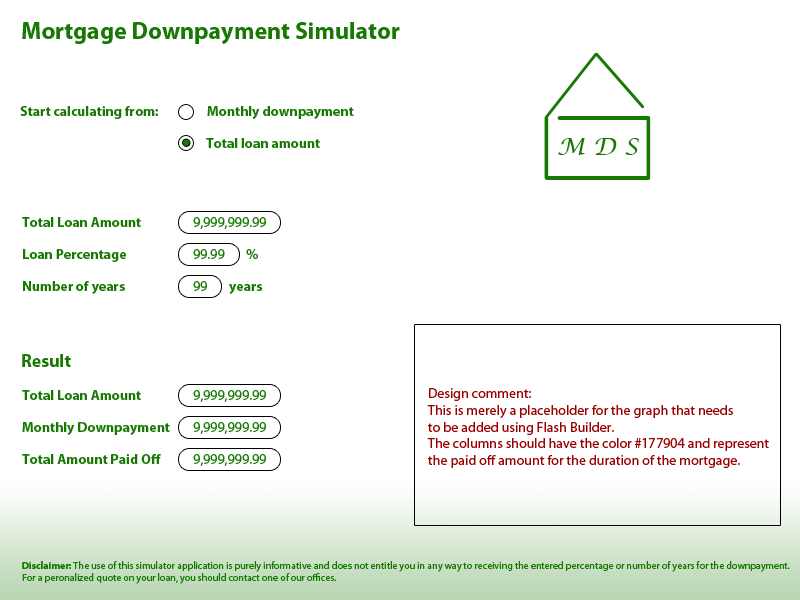
<style>
.page{position:relative;width:800px;height:600px;background:#ffffff}
.page>*{position:absolute;margin:0}
.t1{font:24px "MyriadPro-Bold";color:#177904}
.t2{font:14px "MyriadPro-Bold";color:#177904}
.t3{font:24px "LucidaCalligraphy-Italic";color:#177904}
.t4{font:14px "MyriadPro-Regular";color:#177904}
.t5{font:18px "MyriadPro-Bold";color:#177904}
.t6{font:14px "MyriadPro-Regular";color:#990000}
.t7{font:10px "MyriadPro-Regular";color:#177904}
.t8{font:10px "MyriadPro-Bold";color:#177904}
</style>
<div class="page">
<p class="t1" style="left:22px;top:22px;width:378px;height:22px">Mortgage Downpayment Simulator</p>
<p class="t2" style="left:20px;top:106px;width:138px;height:13px">Start calculating from:</p>
<p class="t2" style="left:207px;top:106px;width:147px;height:13px">Monthly downpayment</p>
<p class="t2" style="left:206px;top:138px;width:114px;height:10px">Total loan amount</p>
<p class="t3" style="left:558px;top:138px;width:81px;height:17px">M D S</p>
<p class="t2" style="left:22px;top:217px;width:119px;height:10px">Total Loan Amount</p>
<p class="t4" style="left:193px;top:217px;width:73px;height:12px">9,999,999.99</p>
<p class="t2" style="left:23px;top:249px;width:103px;height:13px">Loan Percentage</p>
<p class="t4" style="left:193px;top:249px;width:32px;height:10px">99.99</p>
<p class="t2" style="left:246px;top:249px;width:12px;height:10px">%</p>
<p class="t2" style="left:23px;top:281px;width:102px;height:13px">Number of years</p>
<p class="t4" style="left:193px;top:281px;width:14px;height:10px">99</p>
<p class="t2" style="left:229px;top:284px;width:34px;height:10px">years</p>
<p class="t5" style="left:22px;top:354px;width:49px;height:13px">Result</p>
<p class="t2" style="left:22px;top:390px;width:119px;height:10px">Total Loan Amount</p>
<p class="t4" style="left:193px;top:390px;width:73px;height:12px">9,999,999.99</p>
<p class="t6" style="left:427px;top:388px;width:342px;height:80px">Design comment:<br>This is merely a placeholder for the graph that needs<br>to be added using Flash Builder.<br>The columns should have the color #177904 and represent<br>the paid off amount for the duration of the mortgage.</p>
<p class="t2" style="left:22px;top:422px;width:148px;height:13px">Monthly Downpayment</p>
<p class="t4" style="left:193px;top:422px;width:73px;height:12px">9,999,999.99</p>
<p class="t2" style="left:22px;top:454px;width:139px;height:10px">Total Amount Paid Off</p>
<p class="t4" style="left:193px;top:454px;width:73px;height:12px">9,999,999.99</p>
<p class="t7" style="left:22px;top:561px;width:768px;height:23px"><span class="t8">Disclaimer: </span>The use of this simulator application is purely informative and does not entitle you in any way to receiving the entered percentage or number of years for the downpayment.<br>For a peronalized quote on your loan, you should contact one of our offices.</p>
</div>
